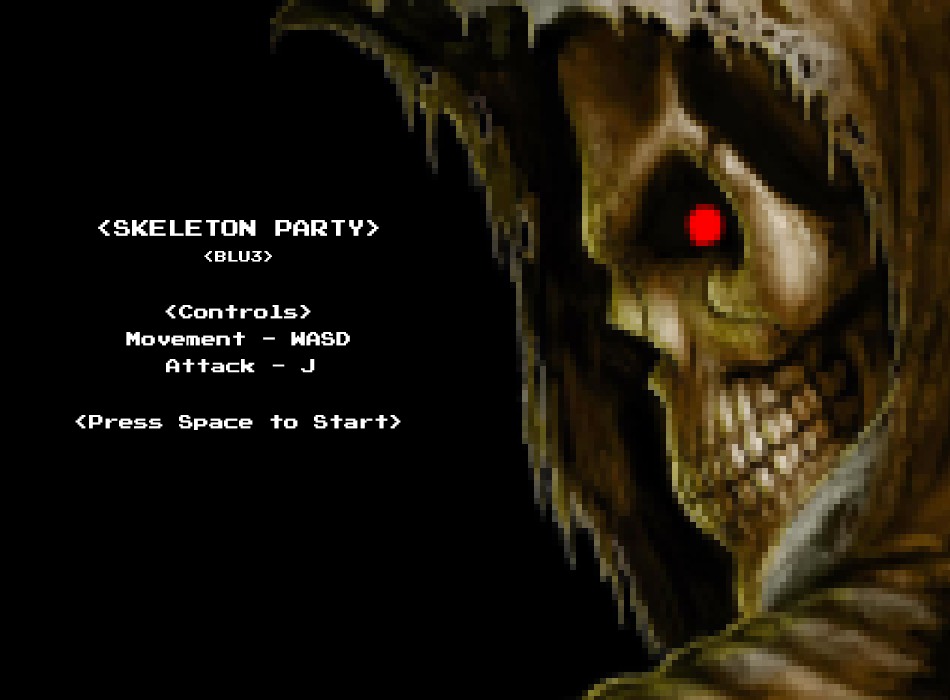
<style>
.page{position:relative;width:950px;height:700px;background:#000000}
.page>*{position:absolute;margin:0}
.t1{font:18px "PressStart2P";color:#ffffff}
.t2{font:12px "PressStart2P";color:#ffffff}
.t3{font:15px "PressStart2P";color:#ffffff}
</style>
<div class="page">
<p class="t1" style="left:98px;top:220px;width:281px;height:16px">&lt;SKELETON PARTY&gt;</p>
<p class="t2" style="left:204px;top:251px;width:68px;height:11px">&lt;BLU3&gt;</p>
<p class="t3" style="left:165px;top:305px;width:146px;height:14px">&lt;Controls&gt;</p>
<p class="t3" style="left:126px;top:332px;width:224px;height:14px">Movement - WASD</p>
<p class="t3" style="left:75px;top:415px;width:326px;height:15px">&lt;Press Space to Start&gt;</p>
</div>
